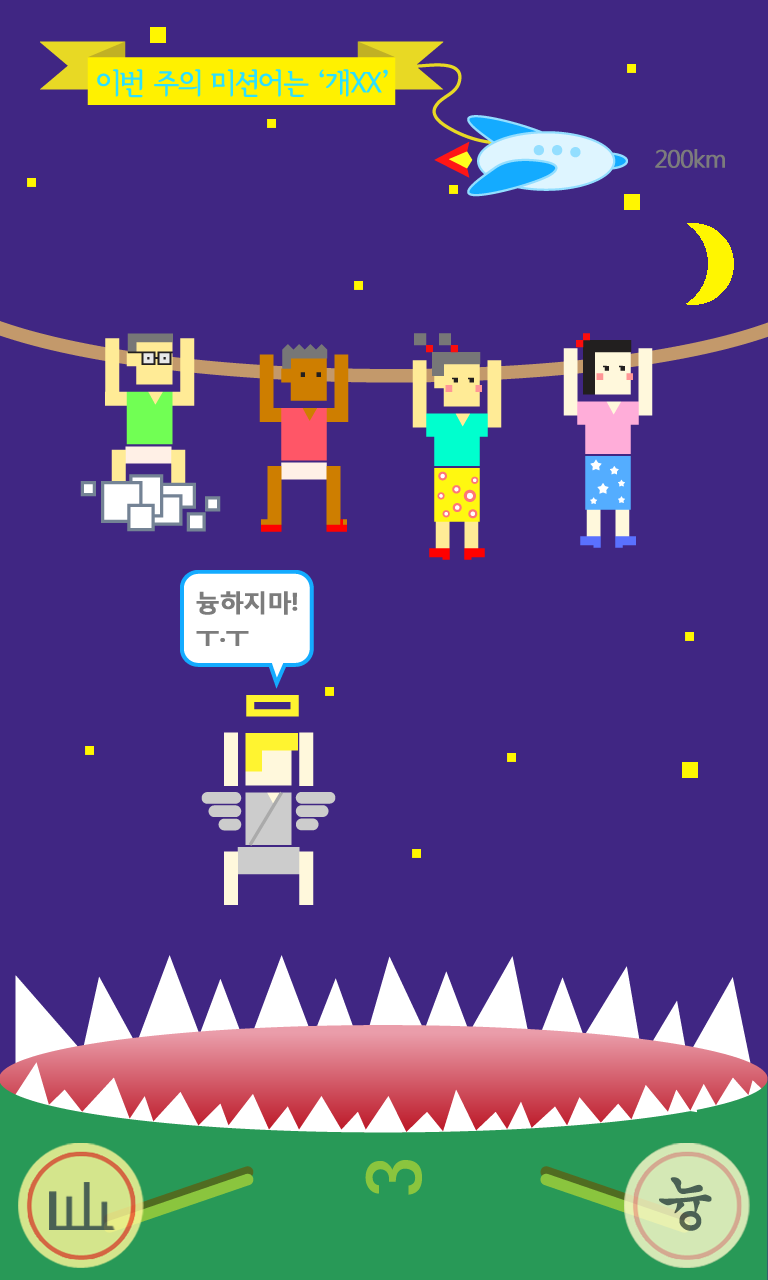
<style>
.page{position:relative;width:768px;height:1280px;background:#402683}
.page>*{position:absolute;margin:0}
.t1{font:28.9px "SeoulHangangM";letter-spacing:-0.05em;color:#2ce0ff;font-weight:bold}
.t2{font:24.4px "MalgunGothicRegular";letter-spacing:-0.05em;color:#7c7c7c;font-weight:bold}
.t3{font:24.4px/31.1px "MalgunGothicBold";letter-spacing:-0.05em;color:#7c7c7c;font-weight:bold}
.t4{font:59.1px "HYgsrB";letter-spacing:-0.05em;color:#535353;font-weight:bold}
</style>
<div class="page">
<p class="t1" style="left:97px;top:69px;width:291px;height:29px">이번 주의 미션어는 ‘개XX’</p>
<p class="t2" style="left:655px;top:149px;width:70px;height:19px">200km</p>
<p class="t3" style="left:196px;top:591px;width:102px;height:55px">늉하지마!<br>ㅜ.ㅜ</p>
<p class="t4" style="left:659px;top:1177px;width:53px;height:54px">늉</p>
</div>
